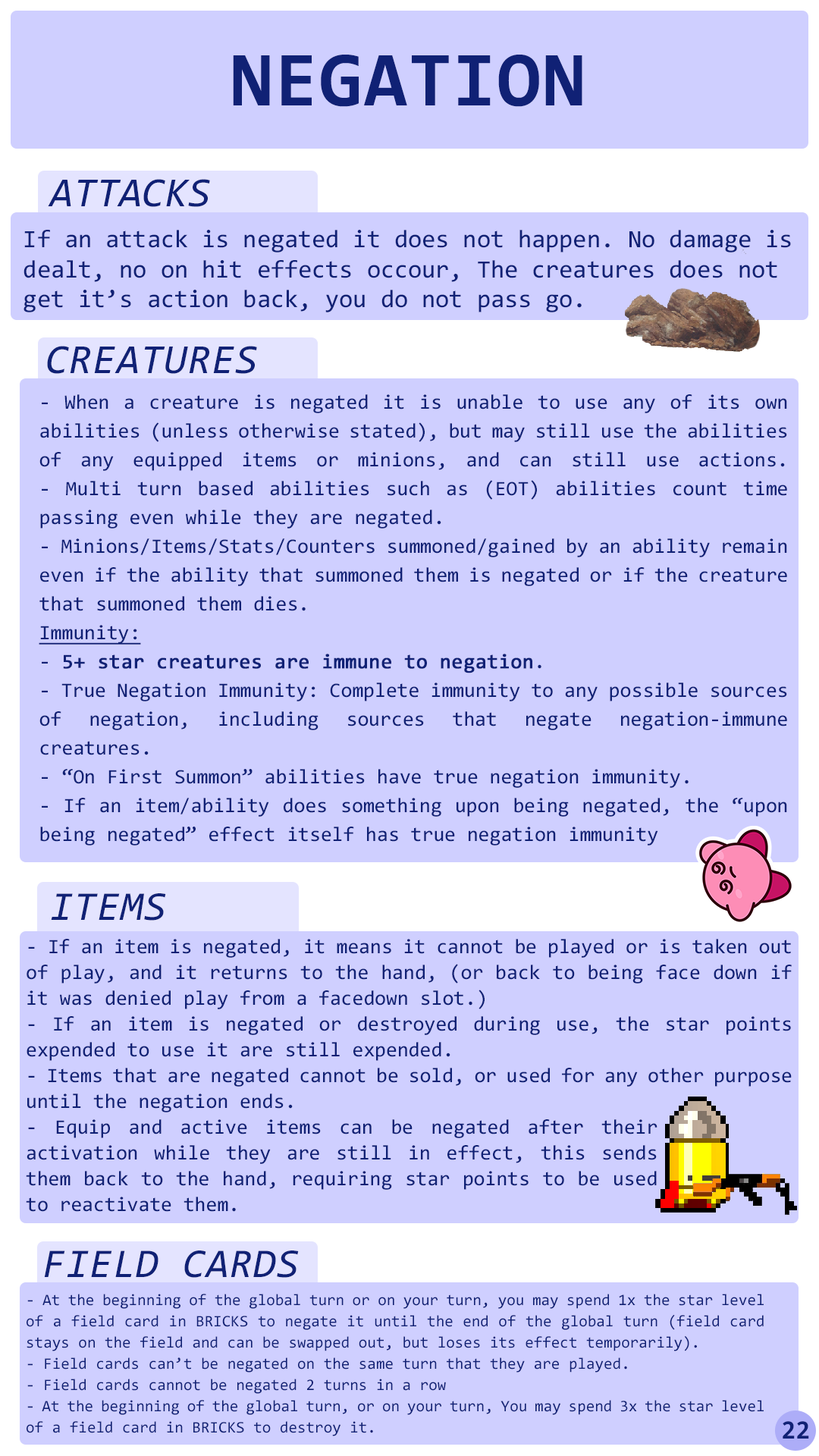
<style>
.page{position:relative;width:819px;height:1456px;background:#cfcfff}
.page>*{position:absolute;margin:0}
.t1{font:78.3px "Consolas-Bold";letter-spacing:0.02em;color:#102175}
.t2{font:41.7px "Consolas-Italic";color:#102175}
.t3{font:25px "Consolas";color:#102175}
.t4{font:41.7px "Consolas-Italic";letter-spacing:0.02em;color:#102175}
.t5{font:20.5px/28.8px "Consolas";color:#102175}
.t6{font:20.5px/28.8px "Consolas";color:#102175;text-decoration:underline}
.t7{font:20.5px/28.8px "Consolas";color:#102175;font-weight:bold}
.t8{font:41.1px "Consolas-Italic";letter-spacing:0.02em;color:#102175}
.t9{font:20.5px/25.8px "Consolas";color:#102175}
.t10{font:15.9px/21.2px "Consolas";color:#102175}
.t11{font:26.4px "Consolas-Bold";color:#102175}
</style>
<div class="page">
<p class="t1" style="left:233px;top:55px;width:349px;height:52px">NEGATION</p>
<p class="t2" style="left:48px;top:179px;width:162px;height:28px">ATTACKS</p>
<p class="t3" style="left:24px;top:230px;width:767px;height:82px">If an attack is negated it does not happen. No damage is dealt, no on hit effects occour, The creatures does not get it’s action back, you do not pass go.</p>
<p class="t4" style="left:47px;top:346px;width:210px;height:28px">CREATURES</p>
<p class="t5" style="left:39px;top:394px;width:748px;height:452px;text-align:justify">- When a creature is negated it is unable to use any of its own abilities (unless otherwise stated), but may still use the abilities of any equipped items or minions, and can still use actions.<br>- Multi turn based abilities such as (EOT) abilities count time passing even while they are negated.<br>- Minions/Items/Stats/Counters summoned/gained by an ability remain even if the ability that summoned them is negated or if the creature that summoned them dies. <br><span class="t6">Immunity:<br></span>- <span class="t7">5+ star creatures are immune to negation</span>.<br>- True Negation Immunity: Complete immunity to any possible sources of negation, including sources that negate negation-immune creatures.<br>- “On First Summon” abilities have true negation immunity.<br>- If an item/ability does something upon being negated, the “upon being negated” effect itself has true negation immunity</p>
<p class="t8" style="left:51px;top:893px;width:115px;height:28px">ITEMS</p>
<p class="t9" style="left:26px;top:939px;width:766px;height:273px;text-align:justify">- If an item is negated, it means it cannot be played or is taken out of play, and it returns to the hand, (or back to being face down if it was denied play from a facedown slot.)<br>- If an item is negated or destroyed during use, the star points expended to use it are still expended.<br>- Items that are negated cannot be sold, or used for any other purpose until the negation ends.<br>- Equip and active items can be negated after their activation while they are still in effect, this sends them back to the hand, requiring star points to be used to reactivate them.</p>
<p class="t8" style="left:44px;top:1250px;width:255px;height:28px">FIELD CARDS</p>
<p class="t10" style="left:27px;top:1294px;width:737px;height:142px;text-align:justify">- At the beginning of the global turn or on your turn, you may spend 1x the star level of a field card in BRICKS to negate it until the end of the global turn (field card stays on the field and can be swapped out, but loses its effect temporarily).<br>- Field cards can’t be negated on the same turn that they are played.<br>- Field cards cannot be negated 2 turns in a row<br>- At the beginning of the global turn, or on your turn, You may spend 3x the star level of a field card in BRICKS to destroy it.</p>
<p class="t11" style="left:783px;top:1421px;width:26px;height:18px">22</p>
</div>
